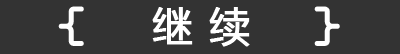
<style>
.page{position:relative;width:400px;height:54px;background:#333333}
.page>*{position:absolute;margin:0}
.t1{font:40px "MicrosoftYaHei";letter-spacing:0.4em;color:#ffffff;font-weight:bold}
</style>
<div class="page">
<p class="t1" style="left:152px;top:7px;width:98px;height:40px">继续</p>
</div>
